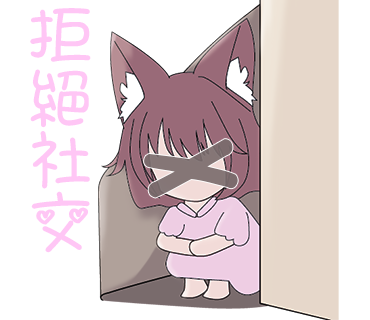
<style>
.page{position:relative;width:370px;height:320px;background:#ffffff}
.page>*{position:absolute;margin:0}
.t1{font:70.7px/62.2px "ARTianniuB5-Bold";letter-spacing:-0.04em;color:#ffc6f5}
.t2{font:98.9px "ª÷±ö¤ò±i·¢";letter-spacing:-0.04em;color:#796b6c}
</style>
<div class="page">
<p class="t1" style="left:30px;top:8px;width:61px;height:245px">拒<br>絕<br>社<br>交</p>
<p class="t2" style="left:144px;top:139px;width:94px;height:59px;rotate:81deg;opacity:0.92">X</p>
</div>
